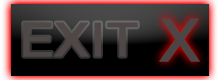
<style>
.page{position:relative;width:220px;height:80px;background:#000000}
.page>*{position:absolute;margin:0}
.t1{font:46.7px "ArialMT";color:#504747;font-weight:bold;scale:1.1 1}
.t2{font:59.4px "ArialMT";color:#504747;font-weight:bold}
</style>
<div class="page">
<p class="t1" style="left:23px;top:22px;width:115px;height:35px">EXIT</p>
<p class="t2" style="left:159px;top:18px;width:41px;height:44px;opacity:0.96">X</p>
</div>
